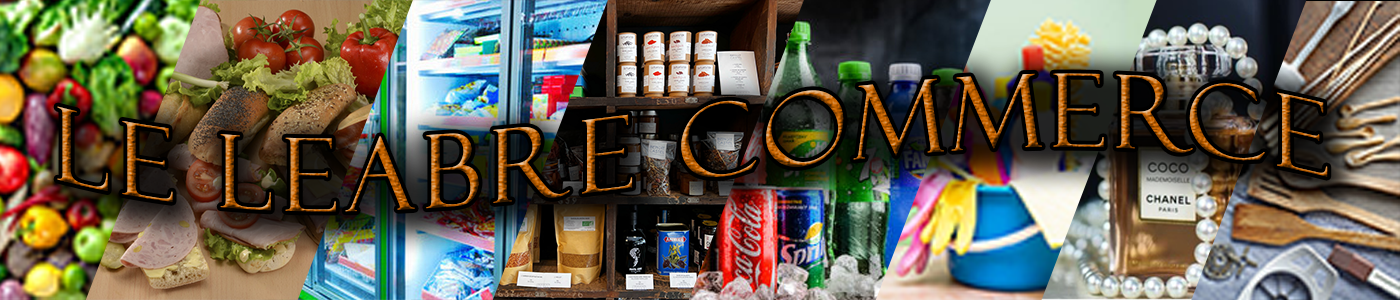
<style>
.page{position:relative;width:1400px;height:300px}
.page>*{position:absolute;margin:0}
.t1{font:102px "FelixTitlingMT";letter-spacing:0.075em}
</style>
<div class="page">
<p class="t1" style="left:57px;top:73px;width:1271px;height:139px">Le LEABre Commerce</p>
</div>
